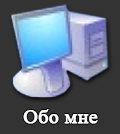
<style>
.page{position:relative;width:120px;height:134px;background:#333333}
.page>*{position:absolute;margin:0}
.t1{font:19.8px "TimesNewRomanPSMT";color:#ffffff;font-weight:bold}
</style>
<div class="page">
<p class="t1" style="left:23px;top:109px;width:75px;height:15px">Обо мне</p>
</div>
